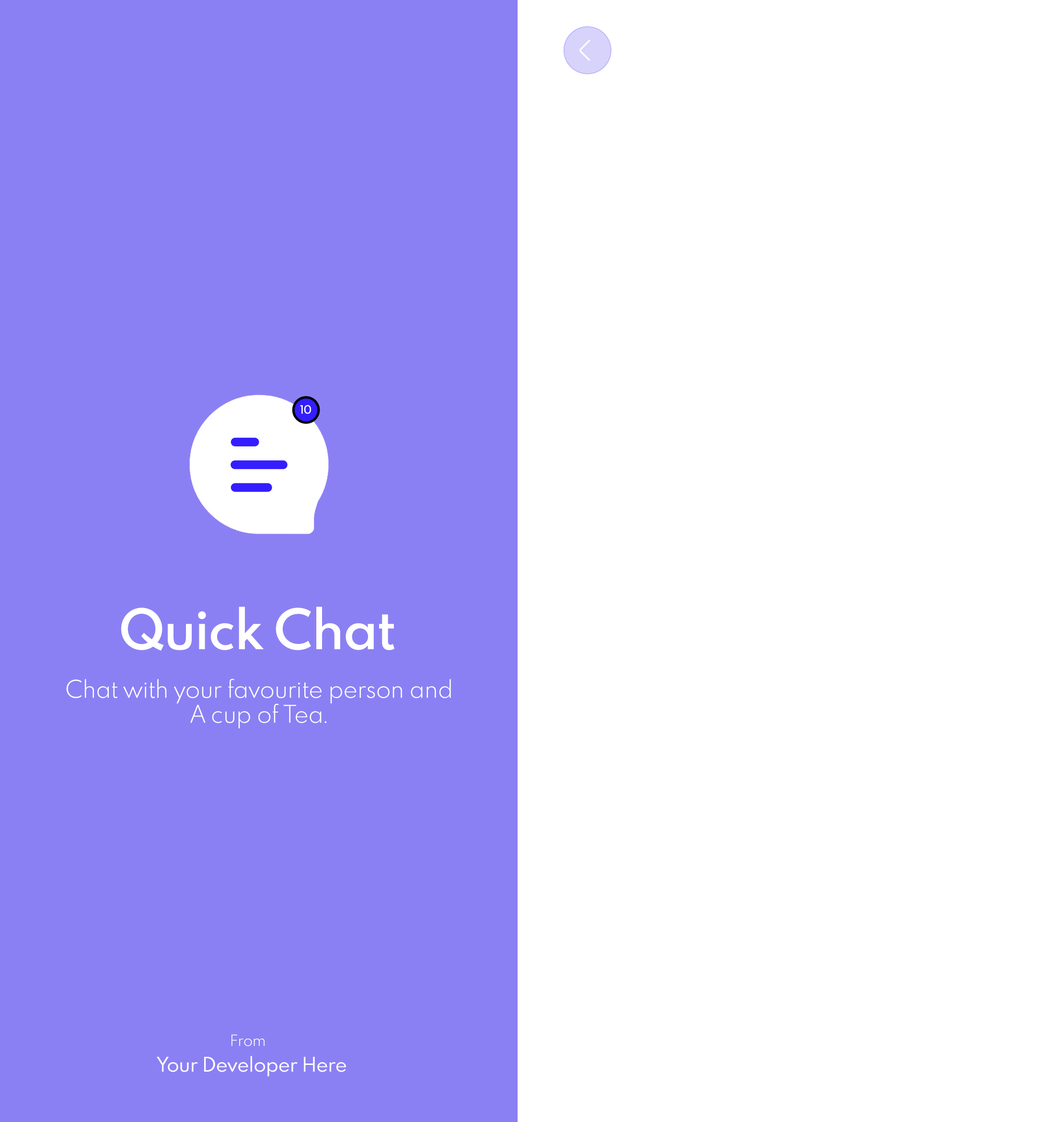
<style>
.page{position:relative;width:1063px;height:1122px;background:#ffffff}
.page>*{position:absolute;margin:0}
.t1{font:10.3px "SpartanMB-SemiBold";color:#ffffff}
.t2{font:49.2px "SpartanMB-SemiBold";color:#ffffff}
.t3{font:21.7px/24.9px "SpartanMB-Light";color:#ffffff}
.t4{font:13.7px "SpartanMB-Light";color:#ffffff}
.t5{font:18px "SpartanMB-Regular";color:#ffffff}
</style>
<div class="page">
<p class="t1" style="left:300px;top:405px;width:11px;height:9px">10</p>
<p class="t2" style="left:121px;top:606px;width:273px;height:44px">Quick Chat</p>
<p class="t3" style="left:66px;top:678px;width:385px;height:50px;text-align:center">Chat with your favourite person and<br>A cup of Tea.</p>
<p class="t4" style="left:232px;top:1034px;width:33px;height:12px">From</p>
<p class="t5" style="left:157px;top:1055px;width:189px;height:21px">Your Developer Here</p>
</div>
